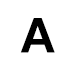
<style>
.page{position:relative;width:75px;height:75px;background:#ffffff}
.page>*{position:absolute;margin:0}
.t1{font:48px "Arial-BoldMT";color:#000000}
</style>
<div class="page">
<p class="t1" style="left:20px;top:18px;width:35px;height:35px">A</p>
</div>
